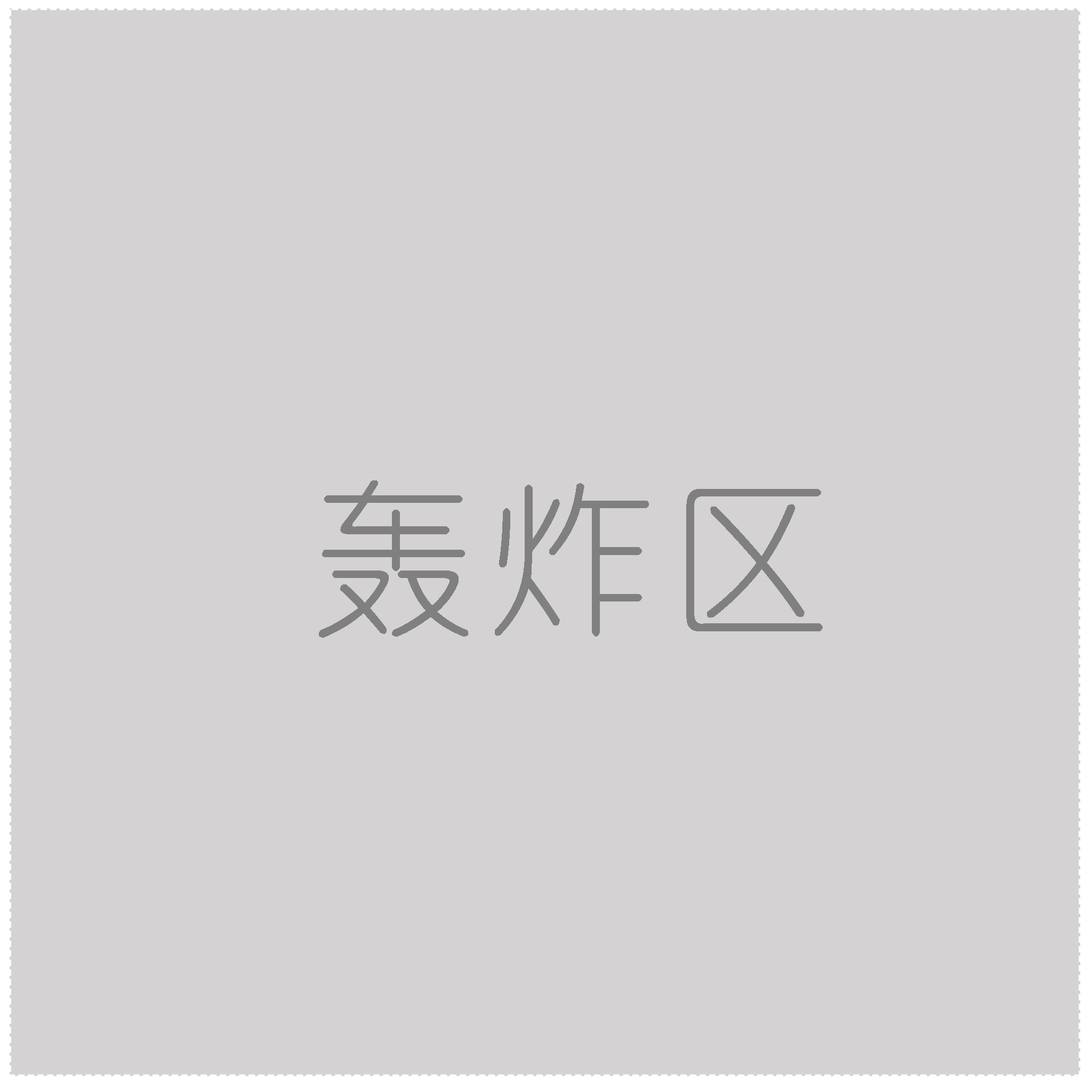
<style>
.page{position:relative;width:1092px;height:1092px;background:#d4d2d2}
.page>*{position:absolute;margin:0}
.t1{font:165.9px "YouYuan";letter-spacing:0.075em;color:#808080}
</style>
<div class="page">
<p class="t1" style="left:319px;top:480px;width:504px;height:158px">轰炸区</p>
</div>
